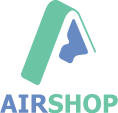
<style>
.page{position:relative;width:118px;height:113px;background:#ffffff}
.page>*{position:absolute;margin:0}
.t1{font:25px "Tahoma-Bold";color:#6cc5a5}
.t2{font:25px "Tahoma-Bold";color:#688ac2}
</style>
<div class="page">
<p class="t1" style="left:0px;top:94px;width:118px;height:20px"><span class="t2">AIR</span>SHOP</p>
</div>
